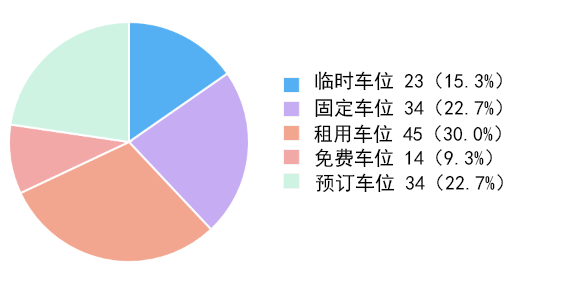
<style>
.page{position:relative;width:576px;height:282px;background:#ffffff}
.page>*{position:absolute;margin:0}
.t1{font:20px "SimHei";color:#000000}
</style>
<div class="page">
<p class="t1" style="left:315px;top:71px;width:187px;height:20px">临时车位 23（15.3%）</p>
<p class="t1" style="left:315px;top:98px;width:187px;height:20px">固定车位 34（22.7%）</p>
<p class="t1" style="left:314px;top:124px;width:187px;height:20px">租用车位 45（30.0%）</p>
<p class="t1" style="left:315px;top:148px;width:177px;height:20px">免费车位 14（9.3%）</p>
<p class="t1" style="left:315px;top:173px;width:188px;height:20px">预订车位 34（22.7%）</p>
</div>
